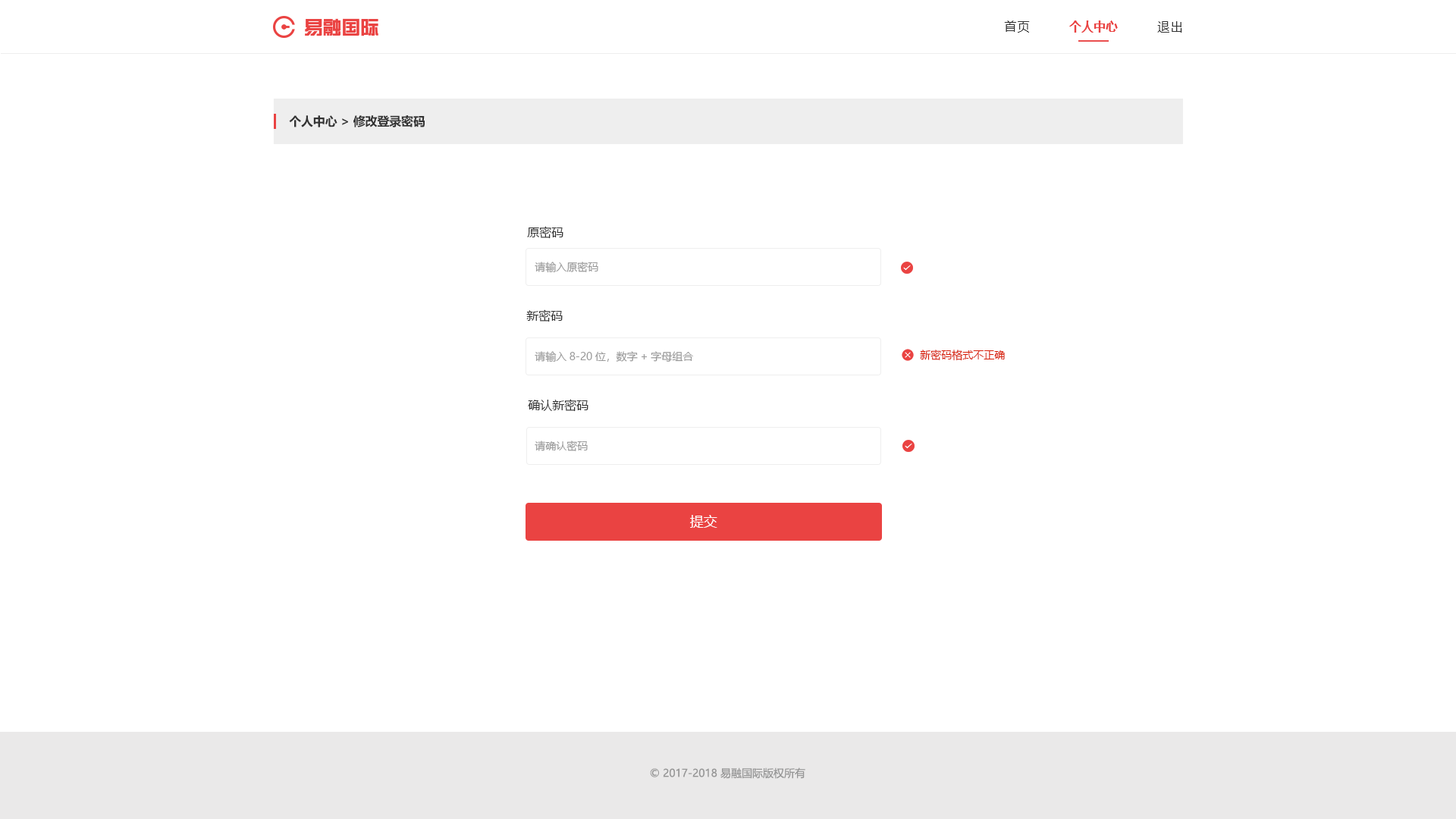
<style>
.page{position:relative;width:1456px;height:819px;background:#ffffff}
.page>*{position:absolute;margin:0}
.t1{font:18.7px "FZZYJW--GB1-0";color:#ea4342}
.t2{font:12.1px "MicrosoftYaHei";letter-spacing:0.08em;color:#333333}
.t3{font:12.1px "MicrosoftYaHei-Bold";color:#ea4342}
.t4{font:12.1px "MicrosoftYaHei-Bold";letter-spacing:-0.01em;color:#333333}
.t5{font:12.1px "MicrosoftYaHei";color:#333333}
.t6{font:10.6px "MicrosoftYaHei";color:#999999}
.t7{font:10.6px "MicrosoftYaHei";color:#d81e06}
.t8{font:13.6px "MicrosoftYaHei";color:#ffffff}
.t9{font:10.6px "MicrosoftYaHei";color:#969696;text-transform:uppercase}
</style>
<div class="page">
<p class="t1" style="left:305px;top:18px;width:73px;height:18px">易融国际</p>
<p class="t2" style="left:1004px;top:20px;width:26px;height:13px">首页</p>
<p class="t3" style="left:1069px;top:20px;width:49px;height:13px">个人中心</p>
<p class="t2" style="left:1157px;top:21px;width:25px;height:12px">退出</p>
<p class="t4" style="left:289px;top:115px;width:136px;height:12px">个人中心 &gt; 修改登录密码</p>
<p class="t5" style="left:527px;top:226px;width:36px;height:13px">原密码</p>
<p class="t6" style="left:535px;top:262px;width:63px;height:11px">请输入原密码</p>
<p class="t5" style="left:526px;top:309px;width:37px;height:13px">新密码</p>
<p class="t6" style="left:535px;top:351px;width:158px;height:11px">请输入8-20位，数字+字母组合</p>
<p class="t7" style="left:920px;top:350px;width:85px;height:11px">新密码格式不正确</p>
<p class="t5" style="left:528px;top:399px;width:60px;height:13px">确认新密码</p>
<p class="t6" style="left:535px;top:441px;width:53px;height:10px">请确认密码</p>
<p class="t8" style="left:690px;top:515px;width:27px;height:13px">提交</p>
<p class="t9" style="left:650px;top:767px;width:155px;height:12px">© 2017-2018 易融国际版权所有</p>
</div>
